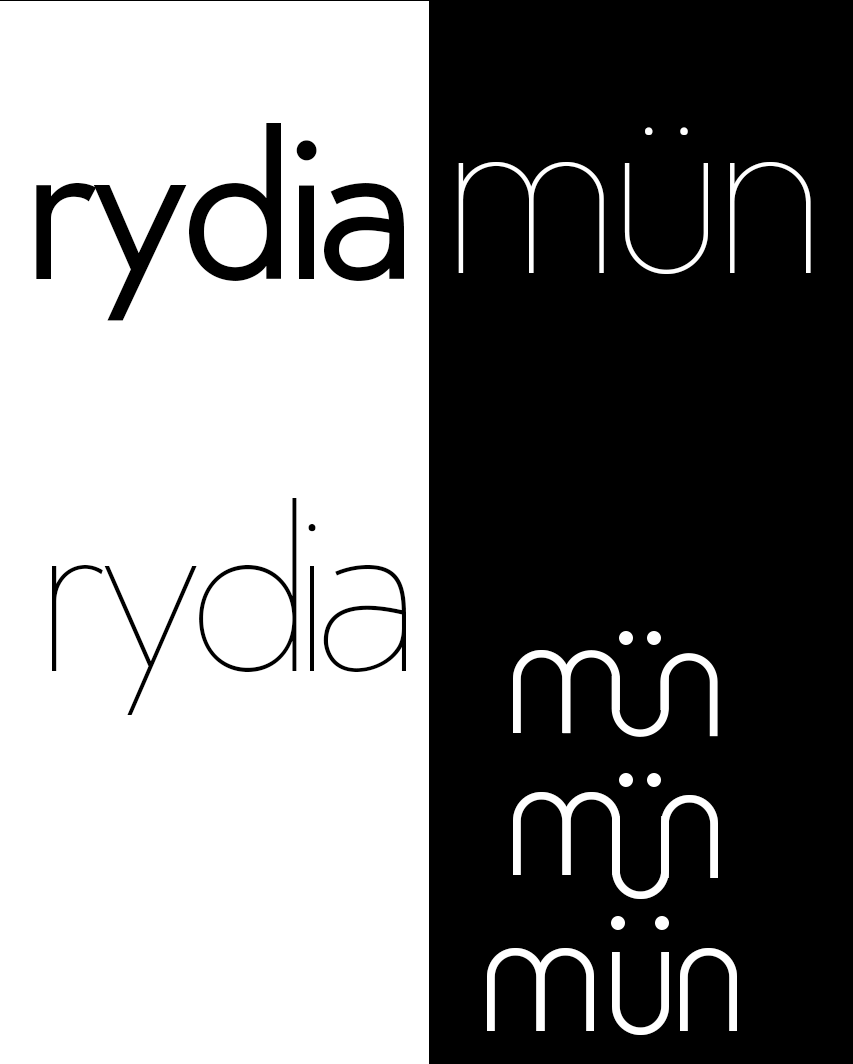
<style>
.page{position:relative;width:853px;height:1064px;background:#000000}
.page>*{position:absolute;margin:0}
.t1{font:192.1px "Edelsans";letter-spacing:-0.06em;color:#000000}
.t2{font:220.1px "Edelsans-UltraLight";letter-spacing:-0.06em;color:#ffffff}
.t3{font:209.5px "Edelsans-UltraLight";letter-spacing:-0.06em;color:#000000}
.t4{font:100.6px "Edelsans";letter-spacing:-0.06em;color:#ffffff}
</style>
<div class="page">
<p class="t1" style="left:36px;top:123px;width:368px;height:198px">rydia</p>
<p class="t2" style="left:458px;top:127px;width:353px;height:147px">mün</p>
<p class="t3" style="left:52px;top:498px;width:354px;height:217px">rydia</p>
<p class="t4" style="left:513px;top:650px;width:57px;height:83px;rotate:180deg">U</p>
<p class="t4" style="left:513px;top:792px;width:57px;height:83px;rotate:180deg">U</p>
<p class="t4" style="left:563px;top:792px;width:57px;height:83px;rotate:180deg">U</p>
<p class="t4" style="left:661px;top:795px;width:57px;height:83px;rotate:180deg">U</p>
<p class="t4" style="left:612px;top:816px;width:57px;height:83px">U</p>
<p class="t4" style="left:487px;top:948px;width:57px;height:83px;rotate:180deg">U</p>
<p class="t4" style="left:537px;top:948px;width:57px;height:83px;rotate:180deg">U</p>
<p class="t4" style="left:612px;top:952px;width:57px;height:83px">U</p>
<p class="t4" style="left:680px;top:948px;width:57px;height:83px;rotate:180deg">U</p>
</div>
